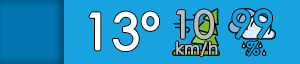
<style>
.page{position:relative;width:300px;height:64px;background:#16a3e0}
.page>*{position:absolute;margin:0}
.t1{font:50px "CenturyGothic";color:#ffffff;font-weight:bold}
.t2{font:37.5px "CenturyGothic";color:#bdbdbd;font-weight:bold}
.t3{font:37.5px "CenturyGothic";color:#16a3e0;font-weight:bold}
.t4{font:16.7px "CenturyGothic";color:#bdbdbd;font-weight:bold}
.t5{font:16.7px "CenturyGothic";color:#16a3e0;font-weight:bold}
</style>
<div class="page">
<p class="t1" style="left:89px;top:11px;width:70px;height:40px">13º</p>
<p class="t2" style="left:176px;top:9px;width:38px;height:31px">10</p>
<p class="t3" style="left:232px;top:9px;width:40px;height:30px">99</p>
<p class="t4" style="left:176px;top:41px;width:42px;height:16px">km/h</p>
<p class="t5" style="left:246px;top:41px;width:14px;height:15px">%</p>
</div>
